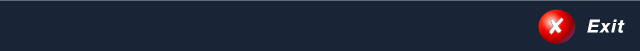
<style>
.page{position:relative;width:640px;height:51px;background:#192536}
.page>*{position:absolute;margin:0}
.t1{font:18px "HelveticaNeue-BoldItalic";letter-spacing:0.075em;color:#ffffff}
</style>
<div class="page">
<p class="t1" style="left:587px;top:19px;width:38px;height:14px">Exit</p>
</div>
